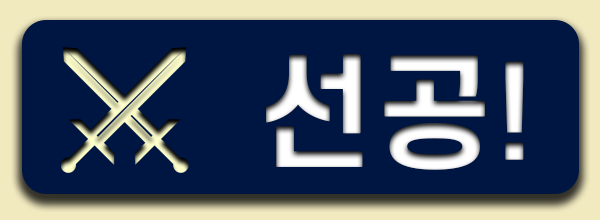
<style>
.page{position:relative;width:600px;height:220px;background:#001642}
.page>*{position:absolute;margin:0}
.t1{font:121.2px "S-CoreDream-6Bold";font-weight:bold}
</style>
<div class="page">
<p class="t1" style="left:266px;top:54px;width:258px;height:116px">선공!</p>
</div>
